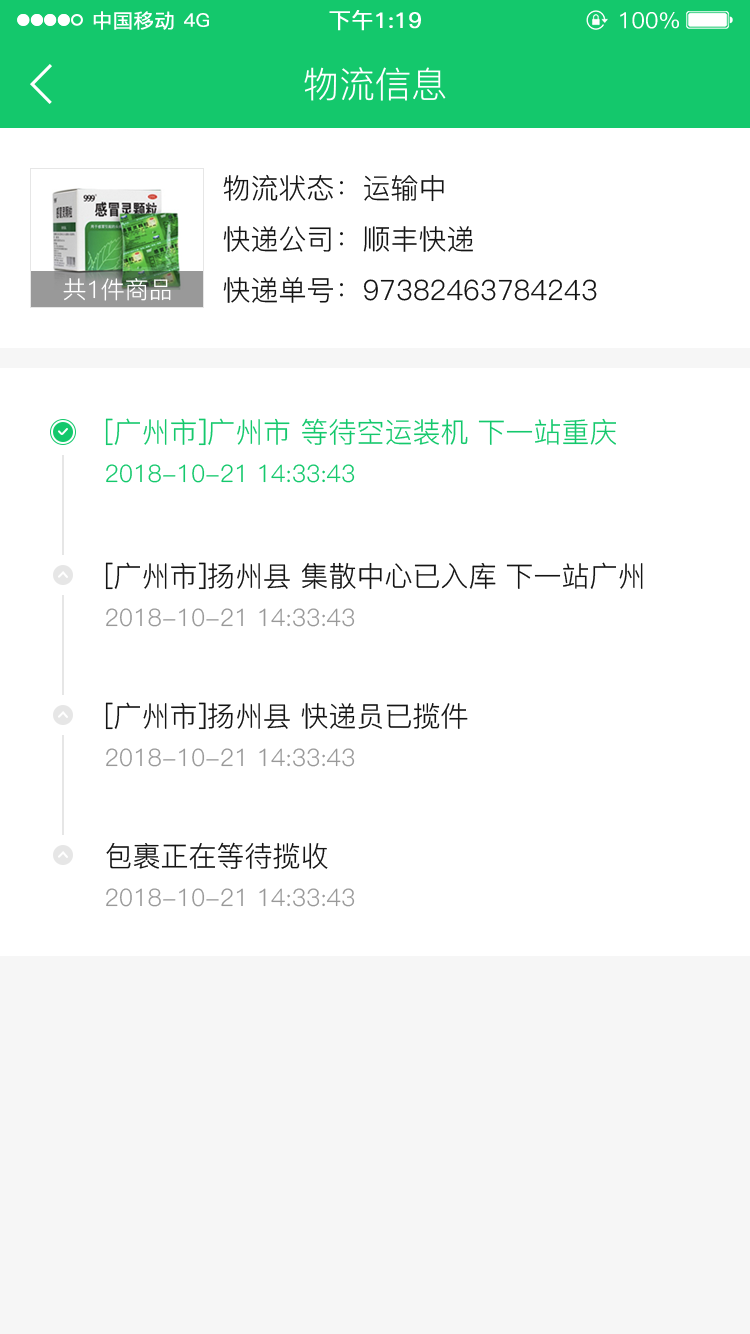
<style>
.page{position:relative;width:750px;height:1334px;background:#ffffff}
.page>*{position:absolute;margin:0}
.t1{font:36px "PingFang-SC-Regular";color:#ffffff}
.t2{font:28px "PingFang-SC-Regular";color:#141414}
.t3{font:24px "PingFang-SC-Regular";color:#ffffff}
.t4{font:28px "PingFang-SC-Regular";color:#14c86c}
.t5{font:24px "PingFang-SC-Regular";color:#14c86c}
.t6{font:24px "PingFang-SC-Regular";color:#999999}
</style>
<div class="page">
<p class="t1" style="left:304px;top:67px;width:142px;height:34px">物流信息</p>
<p class="t2" style="left:223px;top:174px;width:221px;height:28px">物流状态：运输中</p>
<p class="t2" style="left:223px;top:226px;width:250px;height:26px">快递公司：顺丰快递</p>
<p class="t3" style="left:63px;top:278px;width:108px;height:23px">共1件商品</p>
<p class="t2" style="left:223px;top:277px;width:374px;height:26px">快递单号：97382463784243</p>
<p class="t4" style="left:105px;top:418px;width:511px;height:28px">[广州市]广州市 等待空运装机 下一站重庆</p>
<p class="t5" style="left:106px;top:464px;width:249px;height:19px">2018-10-21 14:33:43</p>
<p class="t2" style="left:105px;top:562px;width:538px;height:28px">[广州市]扬州县 集散中心已入库 下一站广州</p>
<p class="t6" style="left:106px;top:608px;width:249px;height:19px">2018-10-21 14:33:43</p>
<p class="t2" style="left:105px;top:702px;width:363px;height:28px">[广州市]扬州县 快递员已揽件</p>
<p class="t6" style="left:106px;top:748px;width:249px;height:19px">2018-10-21 14:33:43</p>
<p class="t2" style="left:106px;top:842px;width:222px;height:27px">包裹正在等待揽收</p>
<p class="t6" style="left:106px;top:888px;width:249px;height:19px">2018-10-21 14:33:43</p>
</div>
